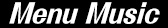
<style>
.page{position:relative;width:168px;height:28px;background:#000000}
.page>*{position:absolute;margin:0}
.t1{font:27.5px "FolkPro-Heavy";color:#ffffff;scale:0.87 1}
</style>
<div class="page">
<p class="t1" style="left:9px;top:2px;width:150px;height:22px">Menu Music</p>
<p class="t1" style="left:10px;top:2px;width:150px;height:22px">Menu Music</p>
</div>
